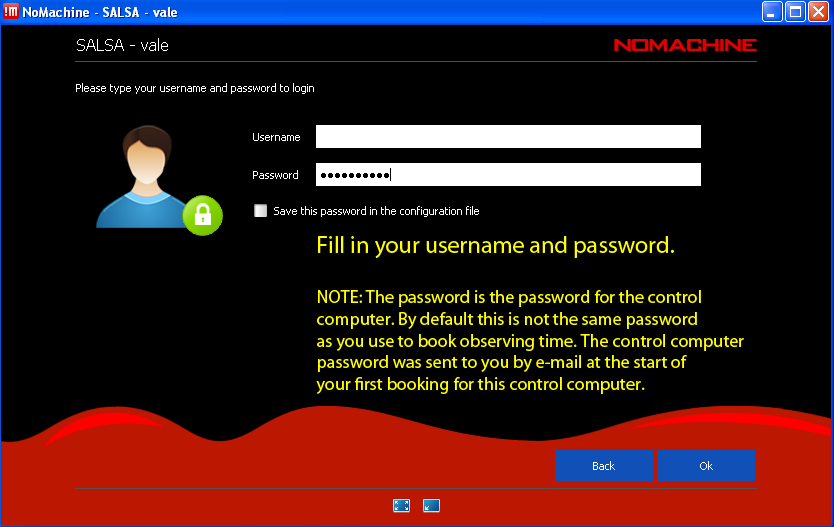
<style>
.page{position:relative;width:834px;height:527px;background:#000000}
.page>*{position:absolute;margin:0}
.t1{font:18px "MyriadPro-Regular";color:#ffff00}
.t2{font:24px "MyriadPro-Regular";color:#ffff00}
</style>
<div class="page">
<p class="t1" style="left:316px;top:236px;width:428px;height:158px"><span class="t2">Fill in your username and password.<br><br></span>NOTE: The password is the password for the control <br>computer. By default this is not the same password <br>as you use to book observing time. The control computer <br>password was sent to you by e-mail at the start of <br>your first booking for this control computer.</p>
</div>
